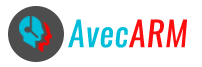
<style>
.page{position:relative;width:202px;height:67px;background:#ffffff}
.page>*{position:absolute;margin:0}
.t1{font:34px "Oswald-RegularItalic";letter-spacing:0.025em;color:#00beda}
.t2{font:34px "Oswald-RegularItalic";letter-spacing:0.025em;color:#00beda;text-transform:uppercase}
.t3{font:34px "Oswald-RegularItalic";letter-spacing:0.025em;color:#fb0e0e}
</style>
<div class="page">
<p class="t1" style="left:68px;top:19px;width:119px;height:29px"><span class="t2">A</span>vec<span class="t3">ARM</span></p>
</div>
